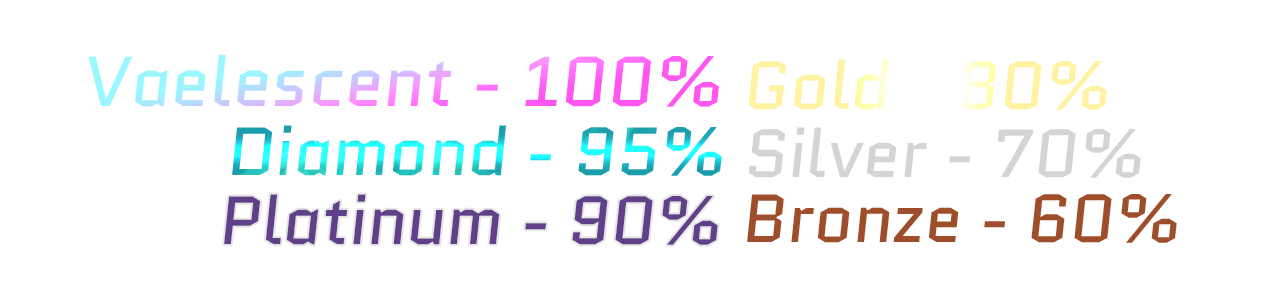
<style>
.page{position:relative;width:1286px;height:299px;background:#ffffff}
.page>*{position:absolute;margin:0}
.t1{font:70.2px "Quantico-Italic"}
.t2{font:67.7px "Quantico-Italic";color:#fff2a2}
.t3{font:67.7px "Quantico-Italic"}
.t4{font:67.7px "Quantico-Italic";color:#cfcfcf}
.t5{font:67.7px "Quantico-Italic";color:#4f2b7b}
.t6{font:67.7px "Quantico-Italic";color:#943b13}
</style>
<div class="page">
<p class="t1" style="left:88px;top:54px;width:631px;height:53px">Vaelescent - 100%</p>
<p class="t2" style="left:748px;top:59px;width:359px;height:51px">Gold - 80%</p>
<p class="t3" style="left:232px;top:125px;width:490px;height:51px">Diamond - 95%</p>
<p class="t4" style="left:748px;top:127px;width:393px;height:51px">Silver - 70%</p>
<p class="t5" style="left:224px;top:194px;width:494px;height:51px">Platinum - 90%</p>
<p class="t6" style="left:747px;top:194px;width:430px;height:49px">Bronze - 60%</p>
</div>
